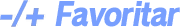
<style>
.page{position:relative;width:180px;height:28px;background:#ffffff}
.page>*{position:absolute;margin:0}
.t1{font:32px "RodinPro-EB";letter-spacing:-0.051em;color:#789ffe;font-style:italic;scale:0.9 1}
</style>
<div class="page">
<p class="t1" style="left:55px;top:1px;width:125px;height:26px">Favoritar</p>
</div>
